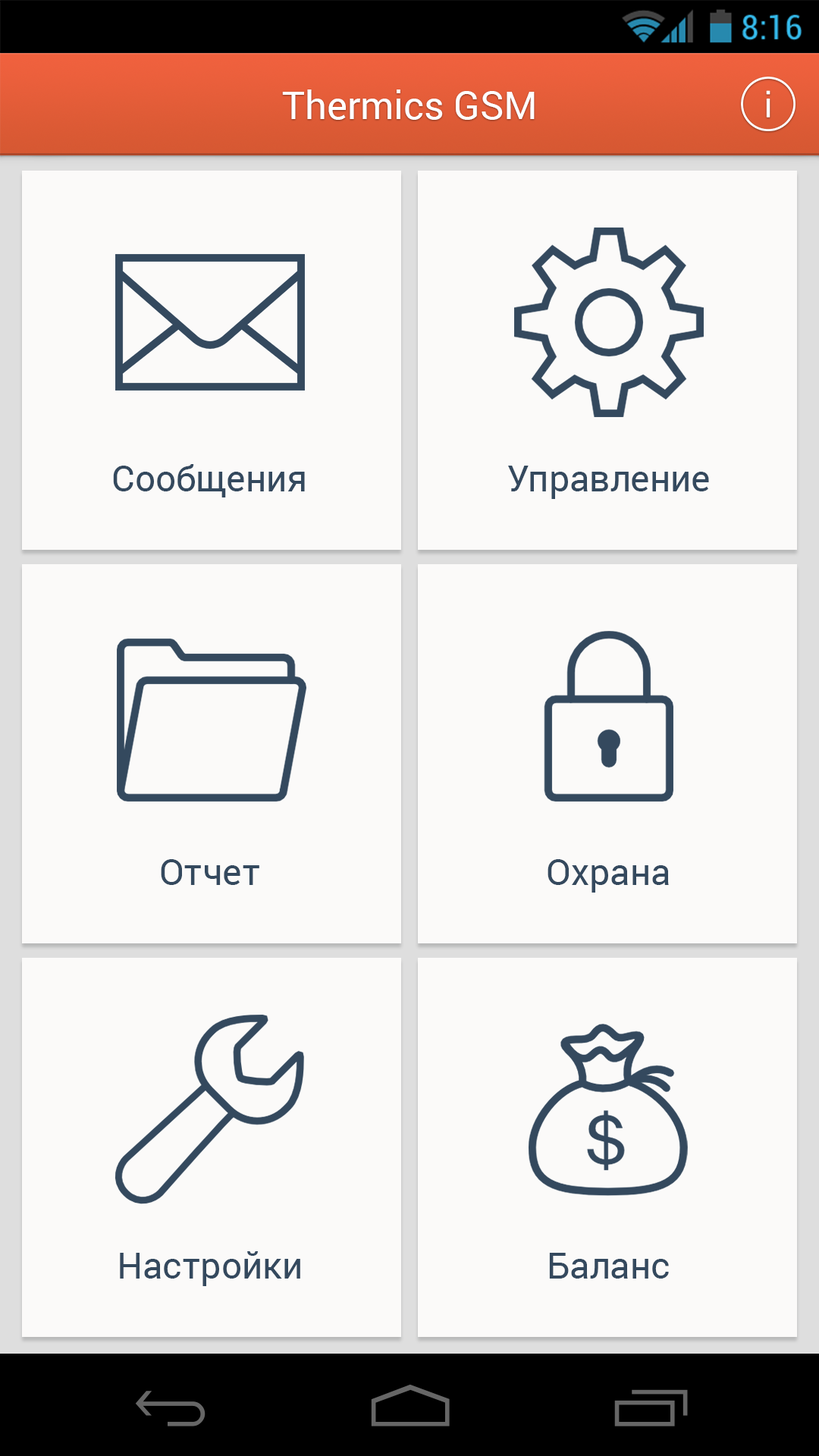
<style>
.page{position:relative;width:819px;height:1456px;background:#fbfaf9}
.page>*{position:absolute;margin:0}
.t1{font:38.4px "Roboto-Regular";color:#ffffff}
.t2{font:36.4px "Roboto-Regular";color:#34495e}
</style>
<div class="page">
<p class="t1" style="left:282px;top:89px;width:253px;height:31px">Thermics GSM</p>
<p class="t2" style="left:113px;top:464px;width:192px;height:33px">Сообщения</p>
<p class="t2" style="left:508px;top:466px;width:201px;height:33px">Управление</p>
<p class="t2" style="left:161px;top:859px;width:98px;height:26px">Отчет</p>
<p class="t2" style="left:548px;top:859px;width:121px;height:34px">Охрана</p>
<p class="t2" style="left:120px;top:1251px;width:180px;height:35px">Настройки</p>
<p class="t2" style="left:549px;top:1253px;width:120px;height:26px">Баланс</p>
</div>
